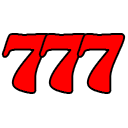
<style>
.page{position:relative;width:128px;height:128px;background:#ffffff}
.page>*{position:absolute;margin:0}
.t1{font:70px "GoudyStout";color:#ff0000;scale:0.95 1}
</style>
<div class="page">
<p class="t1" style="left:3px;top:35px;width:46px;height:57px">7</p>
<p class="t1" style="left:40px;top:35px;width:46px;height:57px">7</p>
<p class="t1" style="left:78px;top:35px;width:46px;height:57px">7</p>
</div>
